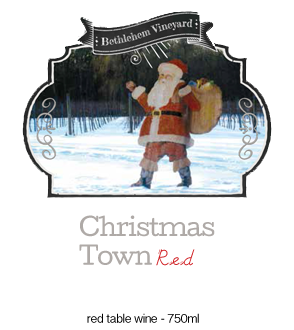
<style>
.page{position:relative;width:294px;height:330px;background:#ffffff}
.page>*{position:absolute;margin:0}
.t1{font:24px "Cutive-Regular";letter-spacing:-0.05em;color:#afaaa7}
.t2{font:24px "SchoolHouseCursiveB";letter-spacing:-0.05em;color:#d12529}
.t3{font:12px "TeluguSangamMN";letter-spacing:-0.05em;color:#000000}
</style>
<div class="page">
<p class="t1" style="left:79px;top:215px;width:136px;height:50px">Christmas <br>Town</p>
<p class="t2" style="left:156px;top:249px;width:39px;height:17px">Red</p>
<p class="t3" style="left:87px;top:313px;width:112px;height:10px">red table wine - 750ml</p>
</div>
